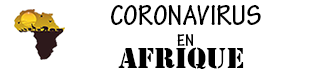
<style>
.page{position:relative;width:312px;height:71px;background:#ffffff}
.page>*{position:absolute;margin:0}
.t1{font:30px "TektonPro-BoldCond";color:#000000}
.t2{font:18px "TektonPro-BoldCond";color:#000000}
.t3{font:30px "Stencil";color:#000000}
</style>
<div class="page">
<p class="t1" style="left:111px;top:5px;width:150px;height:41px;text-align:center">CORONAVIRUS<span class="t2"><br>EN</span></p>
<p class="t3" style="left:118px;top:47px;width:126px;height:22px">AFRIQUE</p>
</div>
